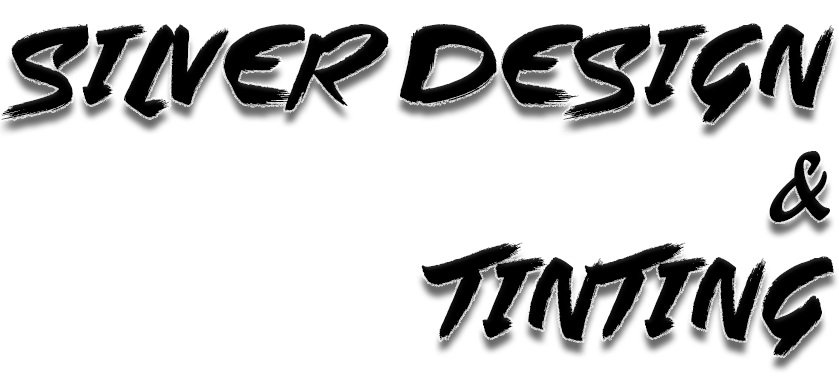
<style>
.page{position:relative;width:839px;height:387px;background:#ffffff}
.page>*{position:absolute;margin:0}
.t1{font:97px "Steppers";color:#000000}
.t2{font:97px "ARBERKLEY";color:#000000}
</style>
<div class="page">
<p class="t1" style="left:1px;top:23px;width:834px;height:334px;text-align:right">Silver Design<br><span class="t2">&amp;<br></span>Tinting</p>
</div>
